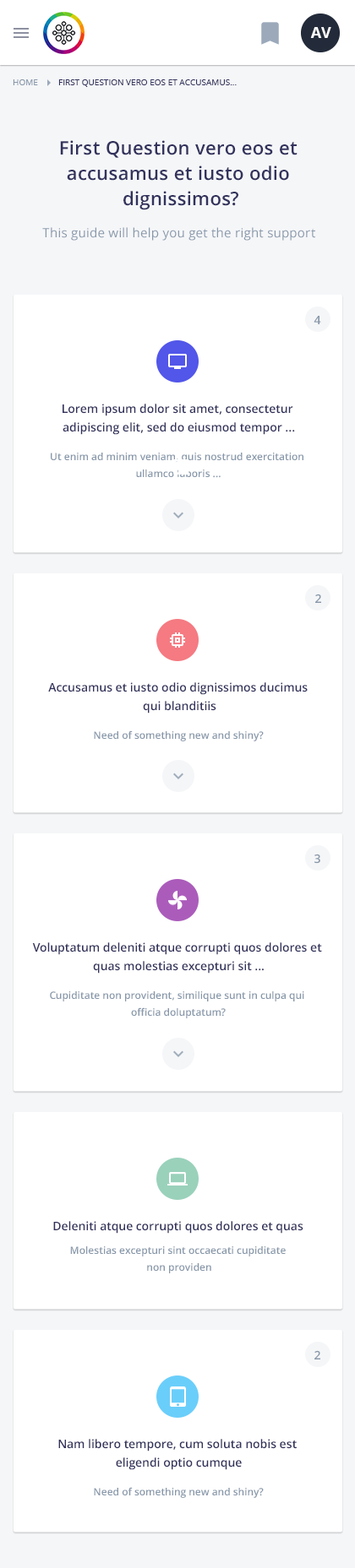
<style>
.page{position:relative;width:355px;height:1568px;background:#ffffff}
.page>*{position:absolute;margin:0}
.t1{font:15.2px "OpenSans-Bold";color:#ffffff;text-transform:uppercase}
.t2{font:8.4px "OpenSans";color:#8898aa;text-transform:uppercase}
.t3{font:8.4px "OpenSans";color:#32325d;text-transform:uppercase}
.t4{font:18.6px/25.3px "OpenSans-Semibold";letter-spacing:0.02em;color:#32325d}
.t5{font:12.7px "OpenSans";letter-spacing:0.02em;color:#8898aa}
.t6{font:11.8px "OpenSans-Semibold";color:#8898aa}
.t7{font:11.8px/18.6px "OpenSans-Semibold";color:#32325d}
.t8{font:10.1px/16.9px "OpenSans-Semibold";color:#8898aa}
.t9{font:10.1px "OpenSans-Semibold";color:#8898aa}
.t10{font:11.8px "OpenSans-Semibold";color:#32325d}
</style>
<div class="page">
<p class="t1" style="left:310px;top:27px;width:21px;height:11px">AV</p>
<p class="t2" style="left:13px;top:79px;width:25px;height:6px">Home</p>
<p class="t3" style="left:58px;top:79px;width:178px;height:8px">First Question vero eos et accusamus...</p>
<p class="t4" style="left:60px;top:140px;width:237px;height:70px;text-align:center">First Question vero eos et <br>accusamus et iusto odio <br>dignissimos?</p>
<p class="t5" style="left:42px;top:227px;width:273px;height:14px">This guide will help you get the right support</p>
<p class="t6" style="left:313px;top:316px;width:8px;height:8px">4</p>
<p class="t7" style="left:62px;top:404px;width:233px;height:31px;text-align:center">Lorem ipsum dolor sit amet, consectetur <br>adipiscing elit, sed do eiusmod tempor ...</p>
<p class="t8" style="left:51px;top:453px;width:252px;height:25px;text-align:center">Ut enim ad minim veniam, quis nostrud exercitation <br>ullamco laboris ...</p>
<p class="t6" style="left:315px;top:594px;width:6px;height:9px">2</p>
<p class="t7" style="left:48px;top:682px;width:259px;height:31px;text-align:center">Accusamus et iusto odio dignissimos ducimus <br>qui blanditiis</p>
<p class="t9" style="left:94px;top:730px;width:169px;height:11px">Need of something new and shiny?</p>
<p class="t6" style="left:314px;top:854px;width:6px;height:10px">3</p>
<p class="t7" style="left:32px;top:942px;width:290px;height:32px;text-align:center">Voluptatum deleniti atque corrupti quos dolores et <br>quas molestias excepturi sit ...</p>
<p class="t8" style="left:50px;top:991px;width:254px;height:27px;text-align:center">Cupiditate non provident, similique sunt in culpa qui <br>officia doluptatum?</p>
<p class="t10" style="left:53px;top:1221px;width:250px;height:13px">Deleniti atque corrupti quos dolores et quas</p>
<p class="t8" style="left:70px;top:1246px;width:215px;height:27px;text-align:center">Molestias excepturi sint occaecati cupiditate <br>non providen</p>
<p class="t6" style="left:314px;top:1350px;width:6px;height:9px">2</p>
<p class="t7" style="left:58px;top:1439px;width:238px;height:31px;text-align:center">Nam libero tempore, cum soluta nobis est <br>eligendi optio cumque</p>
<p class="t9" style="left:94px;top:1487px;width:169px;height:11px">Need of something new and shiny?</p>
</div>
